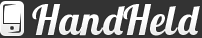
<style>
.page{position:relative;width:202px;height:38px;background:#333333}
.page>*{position:absolute;margin:0}
.t1{font:41px "Lobster1.4";color:#ffffff}
</style>
<div class="page">
<p class="t1" style="left:32px;top:4px;width:168px;height:32px">HandHeld</p>
</div>
